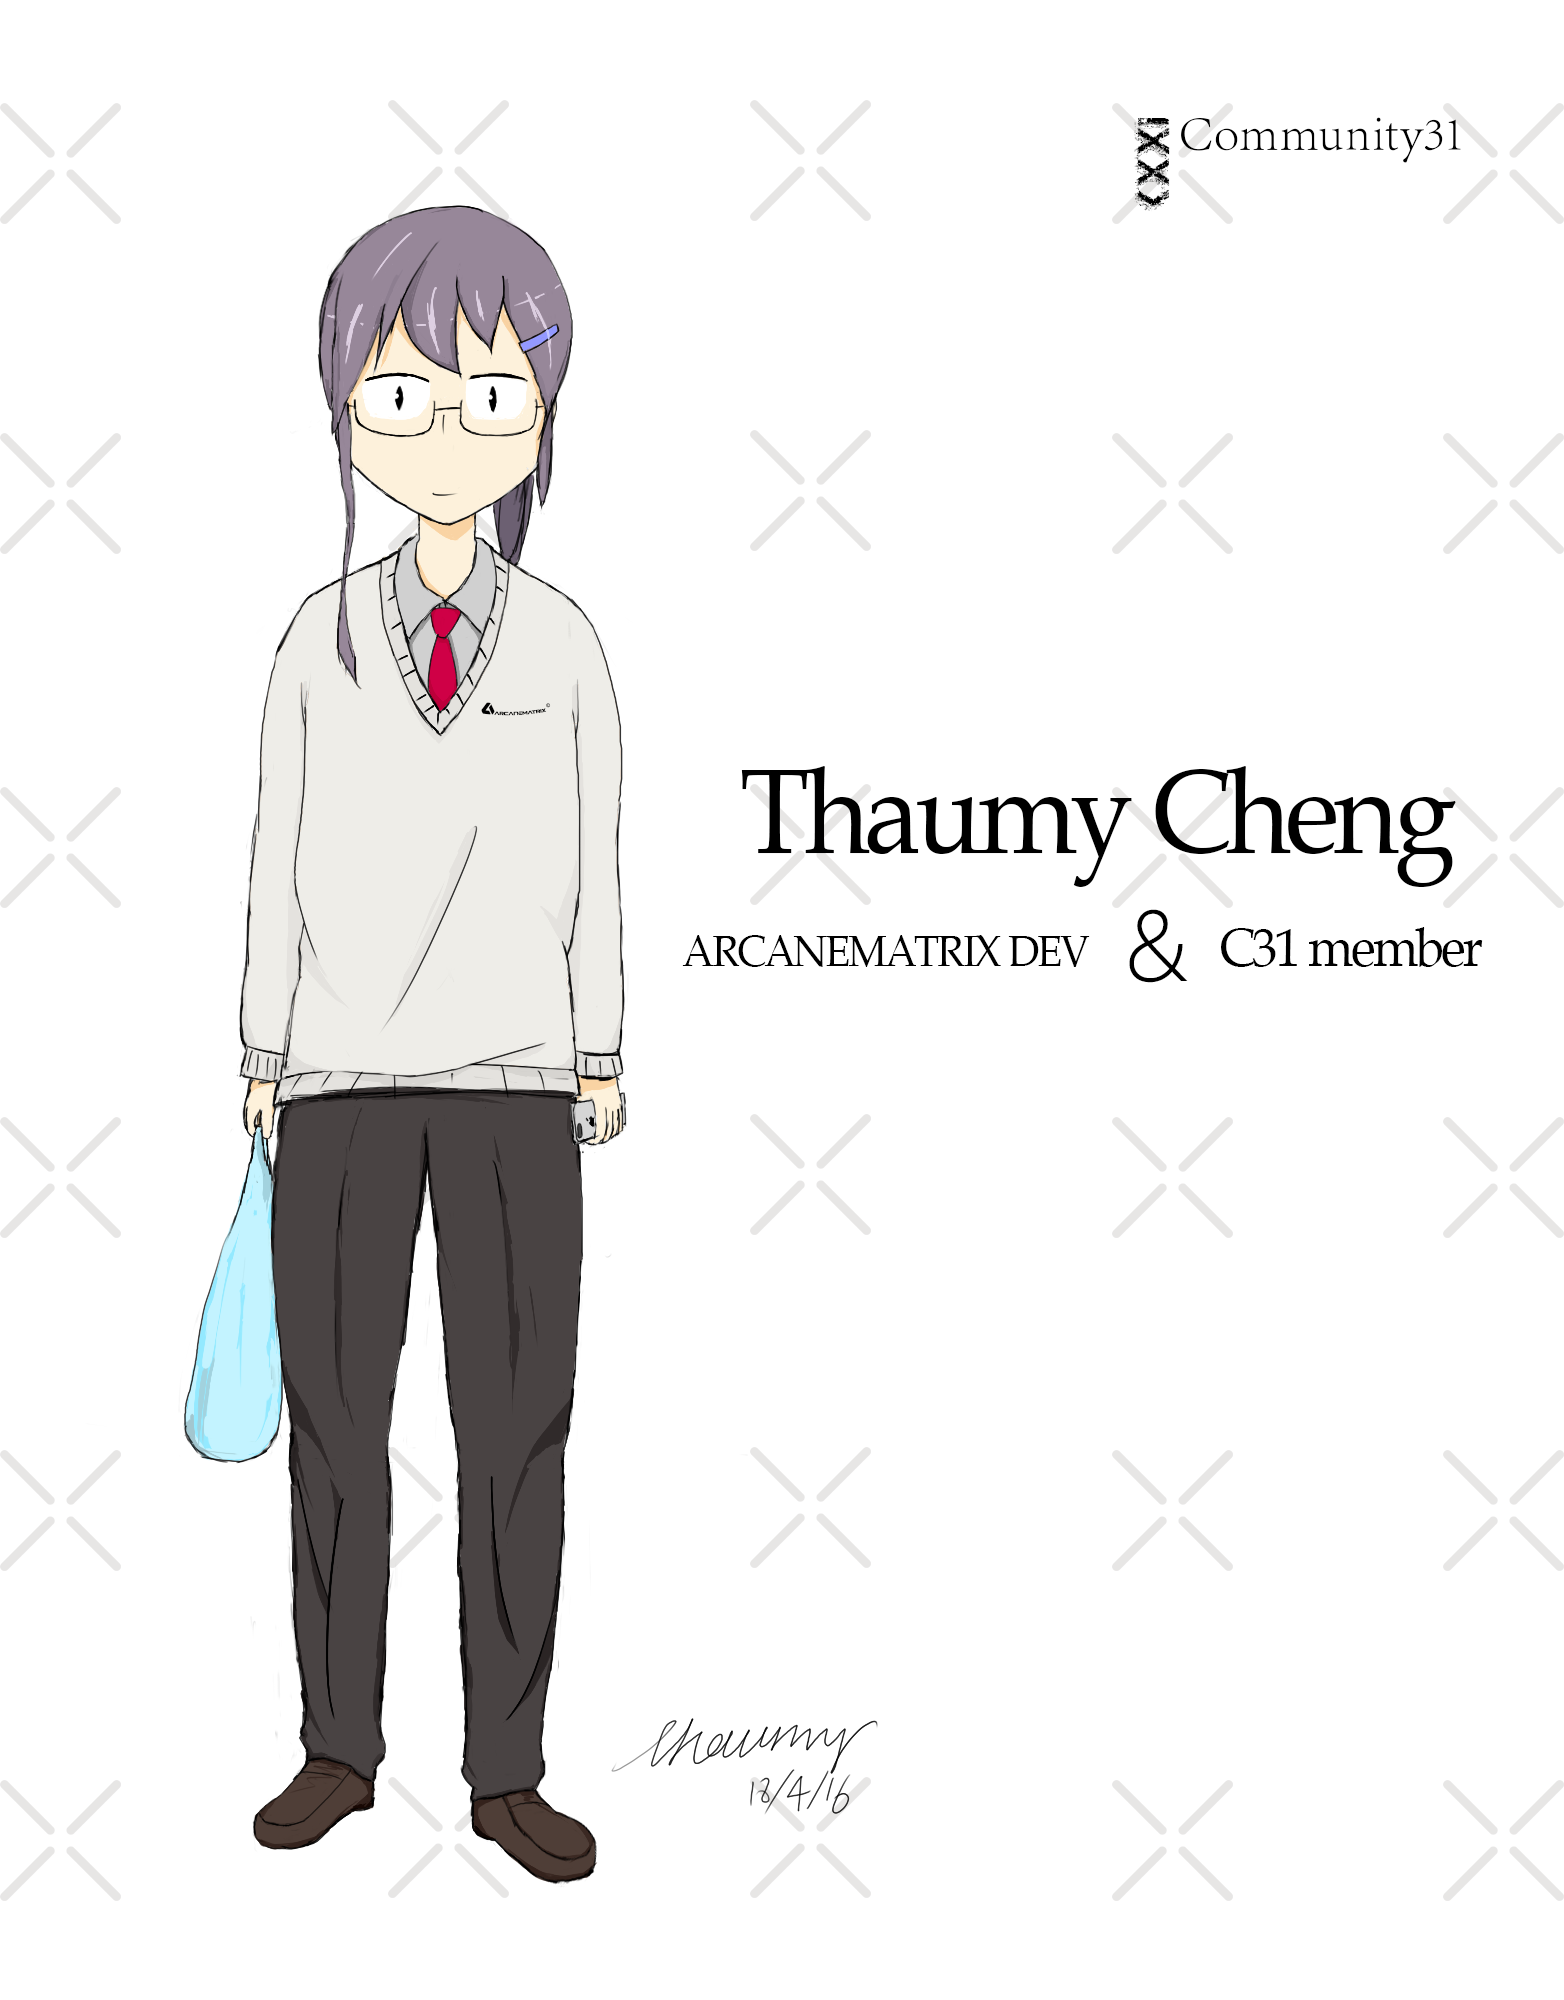
<style>
.page{position:relative;width:1564px;height:2000px;background:#ffffff}
.page>*{position:absolute;margin:0}
.t1{font:12px "BookAntiqua";letter-spacing:-0.05em;color:#000000;scale:0.94 1}
.t2{font:9.3px "MicrosoftYaHeiLight";letter-spacing:-0.05em;color:#000000;scale:0.94 1}
.t3{font:5.4px "BookAntiqua";letter-spacing:-0.05em;color:#000000;scale:0.94 1}
.t4{font:4.3px "BookAntiqua";letter-spacing:-0.05em;color:#000000;scale:0.94 1}
</style>
<div class="page">
<p class="t1" style="left:741px;top:766px;width:715px;height:121px">Thaumy Cheng</p>
<p class="t2" style="left:1129px;top:909px;width:59px;height:74px">&amp;</p>
<p class="t3" style="left:1221px;top:927px;width:262px;height:40px">C31 member</p>
<p class="t4" style="left:682px;top:935px;width:408px;height:32px">ARCANEMATRIX DEV</p>
</div>
